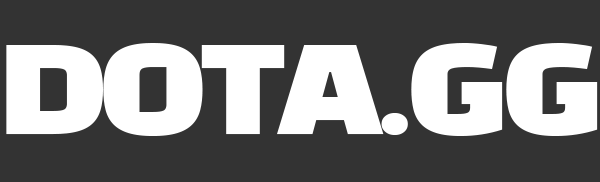
<style>
.page{position:relative;width:600px;height:182px;background:#333333}
.page>*{position:absolute;margin:0}
.t1{font:59.6px "BlackHanSans-Regular";letter-spacing:-0.04em;color:#ffffff;scale:1.18 1}
</style>
<div class="page">
<p class="t1" style="left:6px;top:43px;width:592px;height:93px">DOTA.GG</p>
</div>
